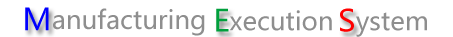
<style>
.page{position:relative;width:453px;height:37px;background:#ffffff}
.page>*{position:absolute;margin:0}
.t1{font:29.9px "MicrosoftYaHei";color:#0000ff}
.t2{font:25.2px "MicrosoftYaHei";color:#8e8e8e}
.t3{font:29.9px "MicrosoftYaHei";color:#009f3c}
.t4{font:29.9px "MicrosoftYaHei";color:#ff0000}
</style>
<div class="page">
<p class="t1" style="left:25px;top:7px;width:24px;height:24px">M</p>
<p class="t2" style="left:53px;top:8px;width:152px;height:28px">anufacturing</p>
<p class="t3" style="left:216px;top:8px;width:13px;height:24px">E</p>
<p class="t2" style="left:229px;top:10px;width:103px;height:21px">xecution</p>
<p class="t4" style="left:340px;top:8px;width:14px;height:24px">S</p>
<p class="t2" style="left:356px;top:12px;width:71px;height:25px">ystem</p>
</div>
